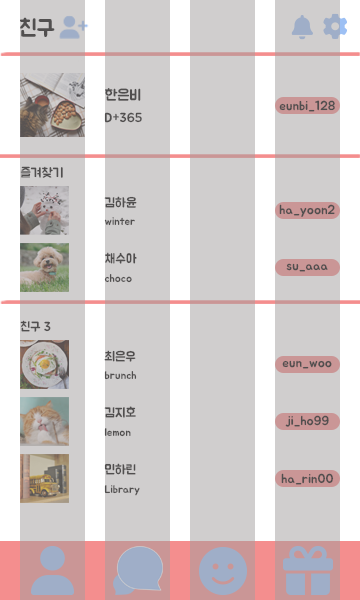
<style>
.page{position:relative;width:360px;height:600px;background:#d0cece}
.page>*{position:absolute;margin:0}
.t1{font:23px "BMJUA";color:#514f4f}
.t2{font:15px "BMJUA";color:#514f4f}
.t3{font:13px "BMJUA";color:#514f4f}
.t4{font:11px "BMJUA";color:#514f4f}
</style>
<div class="page">
<p class="t1" style="left:20px;top:17px;width:35px;height:20px">친구</p>
<p class="t2" style="left:105px;top:88px;width:36px;height:13px">한은비</p>
<p class="t3" style="left:279px;top:100px;width:56px;height:12px">eunbi_128</p>
<p class="t3" style="left:104px;top:112px;width:38px;height:11px">D+365</p>
<p class="t3" style="left:20px;top:166px;width:43px;height:12px">즐겨찾기</p>
<p class="t3" style="left:104px;top:196px;width:33px;height:12px">김하윤</p>
<p class="t3" style="left:279px;top:204px;width:56px;height:13px">ha_yoon2</p>
<p class="t4" style="left:104px;top:217px;width:31px;height:9px">winter</p>
<p class="t3" style="left:105px;top:252px;width:32px;height:12px">채수아</p>
<p class="t3" style="left:286px;top:263px;width:42px;height:9px">su_aaa</p>
<p class="t4" style="left:104px;top:274px;width:28px;height:9px">choco</p>
<p class="t3" style="left:20px;top:320px;width:31px;height:12px">친구 3</p>
<p class="t3" style="left:104px;top:350px;width:32px;height:12px">최은우</p>
<p class="t3" style="left:282px;top:360px;width:50px;height:9px">eun_woo</p>
<p class="t4" style="left:104px;top:371px;width:33px;height:9px">brunch</p>
<p class="t3" style="left:104px;top:406px;width:32px;height:12px">김지호</p>
<p class="t3" style="left:285px;top:415px;width:44px;height:12px">ji_ho99</p>
<p class="t4" style="left:104px;top:428px;width:27px;height:9px">lemon</p>
<p class="t3" style="left:104px;top:463px;width:32px;height:12px">민하린</p>
<p class="t3" style="left:281px;top:473px;width:53px;height:12px">ha_rin00</p>
<p class="t4" style="left:104px;top:485px;width:36px;height:11px">Library</p>
</div>
